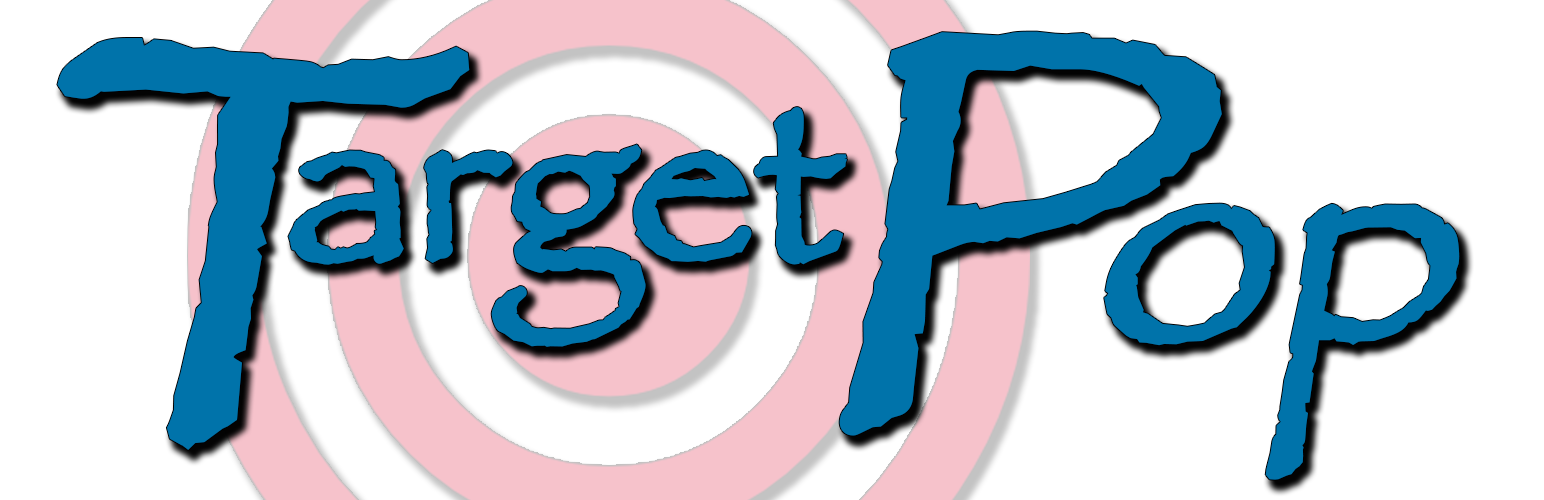
<style>
.page{position:relative;width:1544px;height:500px;background:#ffffff}
.page>*{position:absolute;margin:0}
.t1{font:569.9px "Papyrus";color:#0073aa;font-weight:bold;font-style:italic}
.t2{font:573px "Papyrus";color:#0073aa;font-weight:bold;font-style:italic}
.t3{font:228px "Papyrus";color:#0073aa;font-weight:bold}
.t4{font:286.5px "Papyrus";color:#0073aa;font-weight:bold;font-style:italic}
</style>
<div class="page">
<p class="t1" style="left:57px;top:38px;width:413px;height:412px">T</p>
<p class="t2" style="left:839px;top:31px;width:383px;height:405px">P</p>
<p class="t3" style="left:288px;top:107px;width:559px;height:240px">arget</p>
<p class="t4" style="left:1104px;top:203px;width:356px;height:277px">op</p>
</div>
